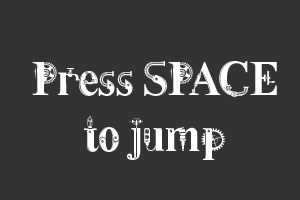
<style>
.page{position:relative;width:300px;height:200px;background:#333333}
.page>*{position:absolute;margin:0}
.t1{font:47px "Steamy";letter-spacing:-0.04em;color:#ffffff}
</style>
<div class="page">
<p class="t1" style="left:32px;top:61px;width:245px;height:99px;text-align:center">Press SPACE<br>to jump</p>
</div>
